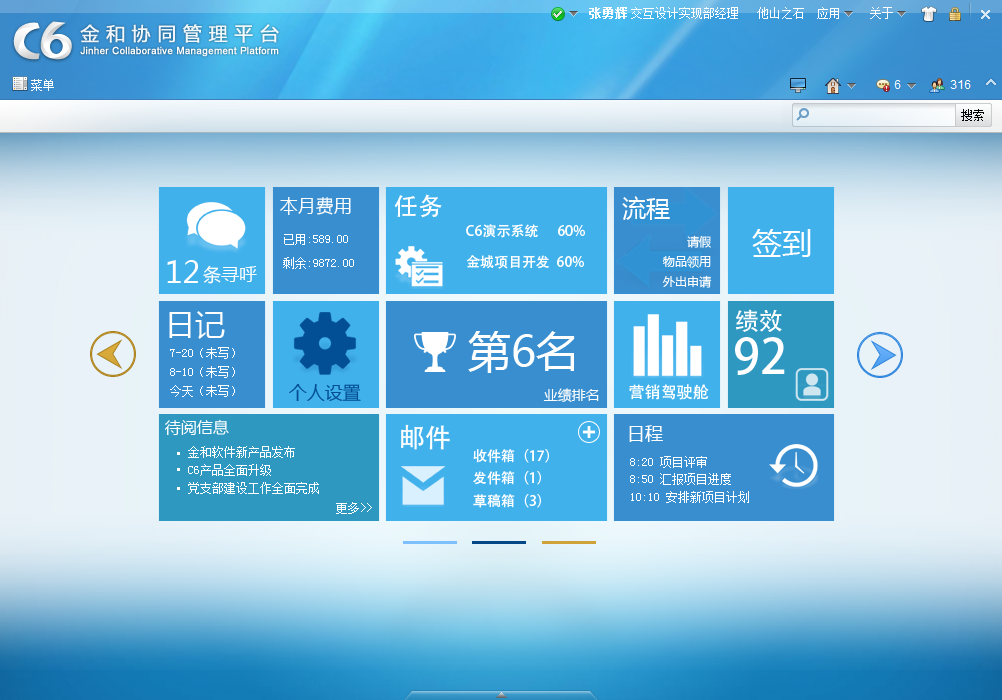
<style>
.page{position:relative;width:1002px;height:700px}
.page>*{position:absolute;margin:0}
.t1{font:18px "MicrosoftYaHei";color:#fefefe}
.t2{font:24px "AdobeHeitiStd-Regular";color:#ffffff}
.t3{font:24px "MicrosoftYaHei";color:#ffffff}
.t4{font:14px "AdobeHeitiStd-Regular";color:#ffffff}
.t5{font:30px "MicrosoftYaHei";color:#ffffff}
.t6{font:12px "SimSun";color:#ffffff}
.t7{font:12px/10px "MicrosoftYaHei";color:#ffffff}
.t8{font:18px "MicrosoftYaHei";color:#ffffff}
.t9{font:30px "MicrosoftYaHei";color:#fefefe}
.t10{font:43px "MicrosoftYaHei";color:#ffffff}
.t11{font:48px "AdobeHeitiStd-Regular";color:#ffffff}
.t12{font:12px/19px "SimSun";color:#ffffff}
.t13{font:18px "MicrosoftYaHei";color:#034f95}
.t14{font:14px "MicrosoftYaHei";color:#ffffff}
.t15{font:16px "AdobeHeitiStd-Regular";color:#feffff}
.t16{font:16px "MicrosoftYaHei";color:#ffffff}
.t17{font:26px "AdobeHeitiStd-Regular";color:#fffefe}
.t18{font:12px/18px "SimSun";color:#ffffff}
.t19{font:12px "MyriadPro-Regular";color:#ffffff}
</style>
<div class="page">
<p class="t1" style="left:280px;top:197px;width:71px;height:18px">本月费用</p>
<p class="t2" style="left:394px;top:194px;width:48px;height:24px">任务</p>
<p class="t3" style="left:622px;top:196px;width:48px;height:24px">流程</p>
<p class="t4" style="left:466px;top:224px;width:119px;height:14px">C6演示系统      60%</p>
<p class="t5" style="left:752px;top:229px;width:59px;height:28px">签到</p>
<p class="t6" style="left:284px;top:234px;width:64px;height:11px">已用:589.00</p>
<p class="t7" style="left:662px;top:235px;width:50px;height:53px;text-align:right">请假<br><br>物品领用<br><br>外出申请</p>
<p class="t6" style="left:283px;top:257px;width:71px;height:12px">剩余:9872.00</p>
<p class="t4" style="left:466px;top:255px;width:118px;height:14px">金城项目开发  60%</p>
<p class="t5" style="left:167px;top:260px;width:31px;height:23px">12</p>
<p class="t8" style="left:203px;top:265px;width:54px;height:19px">条寻呼</p>
<p class="t9" style="left:169px;top:311px;width:56px;height:28px">日记</p>
<p class="t2" style="left:736px;top:309px;width:46px;height:23px">绩效</p>
<p class="t10" style="left:468px;top:331px;width:107px;height:42px">第6名</p>
<p class="t11" style="left:735px;top:337px;width:50px;height:38px">92</p>
<p class="t12" style="left:170px;top:347px;width:65px;height:50px">7-20（未写）<br>8-10（未写）<br>今天（未写）</p>
<p class="t13" style="left:289px;top:384px;width:72px;height:17px">个人设置</p>
<p class="t14" style="left:543px;top:388px;width:56px;height:14px">业绩排名</p>
<p class="t15" style="left:629px;top:384px;width:80px;height:16px">营销驾驶舱</p>
<p class="t16" style="left:165px;top:419px;width:64px;height:16px">待阅信息</p>
<p class="t17" style="left:401px;top:424px;width:49px;height:26px">邮件</p>
<p class="t8" style="left:629px;top:425px;width:34px;height:17px">日程</p>
<p class="t18" style="left:188px;top:446px;width:131px;height:48px">金和软件新产品发布<br>C6产品全面升级<br>党支部建设工作全面完成</p>
<p class="t4" style="left:473px;top:449px;width:76px;height:14px">收件箱（17）</p>
<p class="t6" style="left:630px;top:456px;width:77px;height:12px">8:20 项目评审</p>
<p class="t4" style="left:473px;top:471px;width:68px;height:14px">发件箱（1）</p>
<p class="t6" style="left:630px;top:473px;width:101px;height:12px">8:50 汇报项目进度</p>
<p class="t4" style="left:473px;top:494px;width:68px;height:14px">草稿箱（3）</p>
<p class="t6" style="left:631px;top:491px;width:118px;height:12px">10:10 安排新项目计划</p>
<p class="t19" style="left:336px;top:502px;width:36px;height:12px">更多&gt;&gt;</p>
</div>
